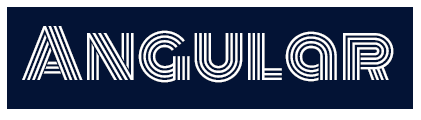
<style>
.page{position:relative;width:421px;height:120px;background:#031335}
.page>*{position:absolute;margin:0}
.t1{font:66.8px "Monoton-Regular";color:#ffffff}
</style>
<div class="page">
<p class="t1" style="left:22px;top:26px;width:372px;height:57px">Angular</p>
</div>
